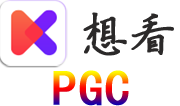
<style>
.page{position:relative;width:180px;height:106px;background:#ffffff}
.page>*{position:absolute;margin:0}
.t1{font:47.4px "FZYBKSJW--GB1-0";letter-spacing:0.006em;color:#2b2929;font-weight:bold}
.t2{font:49.6px "KaiTi";letter-spacing:0.006em;font-weight:bold}
</style>
<div class="page">
<p class="t1" style="left:83px;top:12px;width:91px;height:44px">想看</p>
<p class="t2" style="left:53px;top:70px;width:76px;height:36px">PGC</p>
</div>
